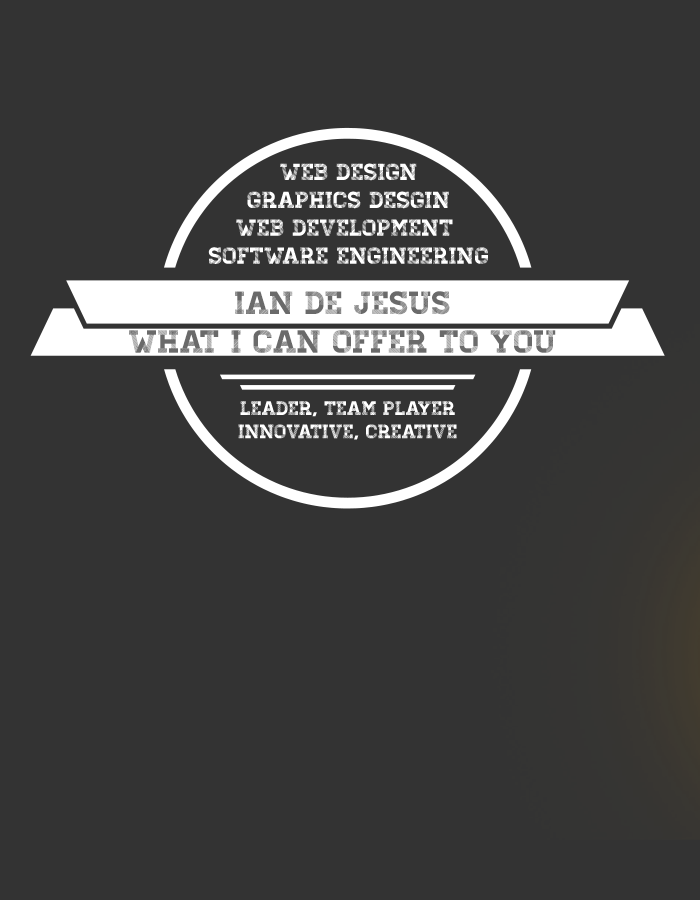
<style>
.page{position:relative;width:700px;height:900px;background:#333333}
.page>*{position:absolute;margin:0}
.t1{font:23.3px "Homestead-Display";color:#ffffff}
.t2{font:32.2px "Homestead-Display";color:#6a6a6a}
.t3{font:19.4px "Homestead-Display";color:#ffffff}
</style>
<div class="page">
<p class="t1" style="left:208px;top:163px;width:280px;height:101px;text-align:center">Web Design<br>Graphics Desgin<br>Web development <br>Software Engineering</p>
<p class="t2" style="left:129px;top:291px;width:427px;height:62px;text-align:center">Ian De Jesus <br>What i can offer to you</p>
<p class="t3" style="left:238px;top:401px;width:219px;height:39px;text-align:center">Leader, Team player<br>Innovative, Creative</p>
</div>
